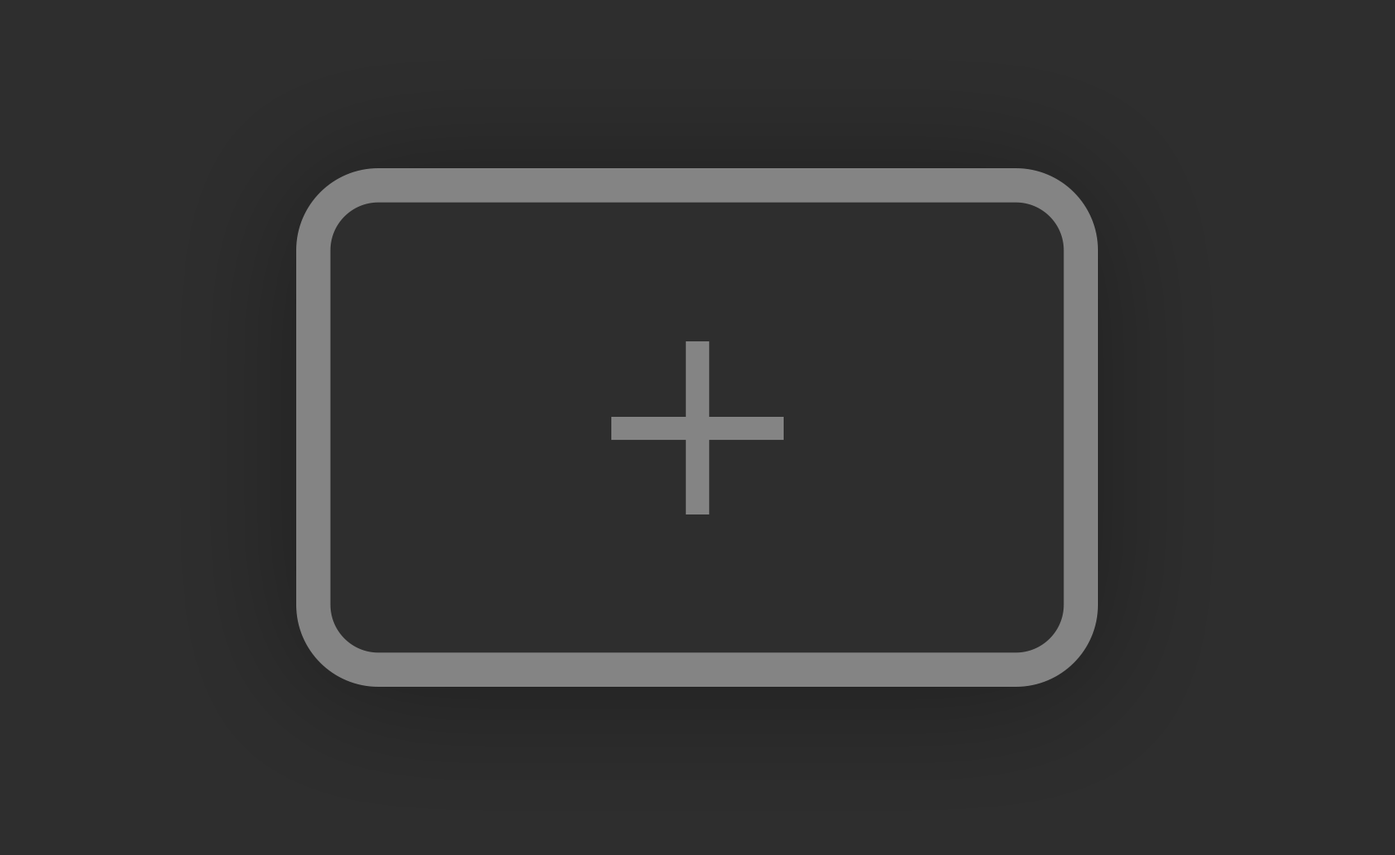
<style>
.page{position:relative;width:1395px;height:855px;background:#2e2e2e}
.page>*{position:absolute;margin:0}
.t1{font:341.9px "HelveticaNeue";color:#848484}
</style>
<div class="page">
<p class="t1" style="left:611px;top:341px;width:173px;height:173px">+</p>
</div>
